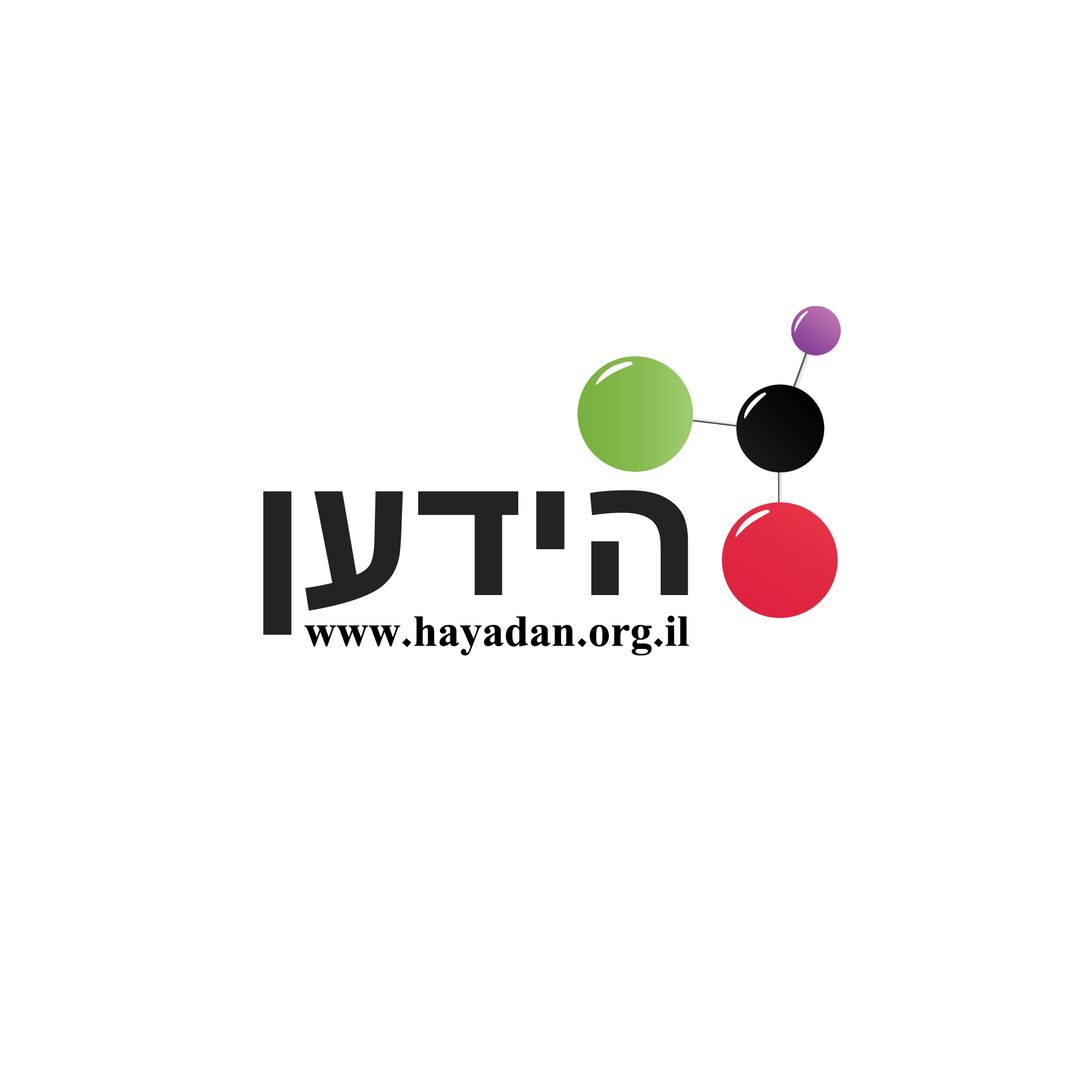
<style>
.page{position:relative;width:1092px;height:1092px;background:#ffffff}
.page>*{position:absolute;margin:0}
.t1{font:199.9px "Arial-BoldMT";color:#232323}
.t2{font:44.4px "David-Bold";color:#000000}
</style>
<div class="page">
<p class="t1" style="left:263px;top:490px;width:425px;height:145px">ןעדיה</p>
<p class="t2" style="left:304px;top:615px;width:385px;height:41px">www.hayadan.org.il</p>
</div>
